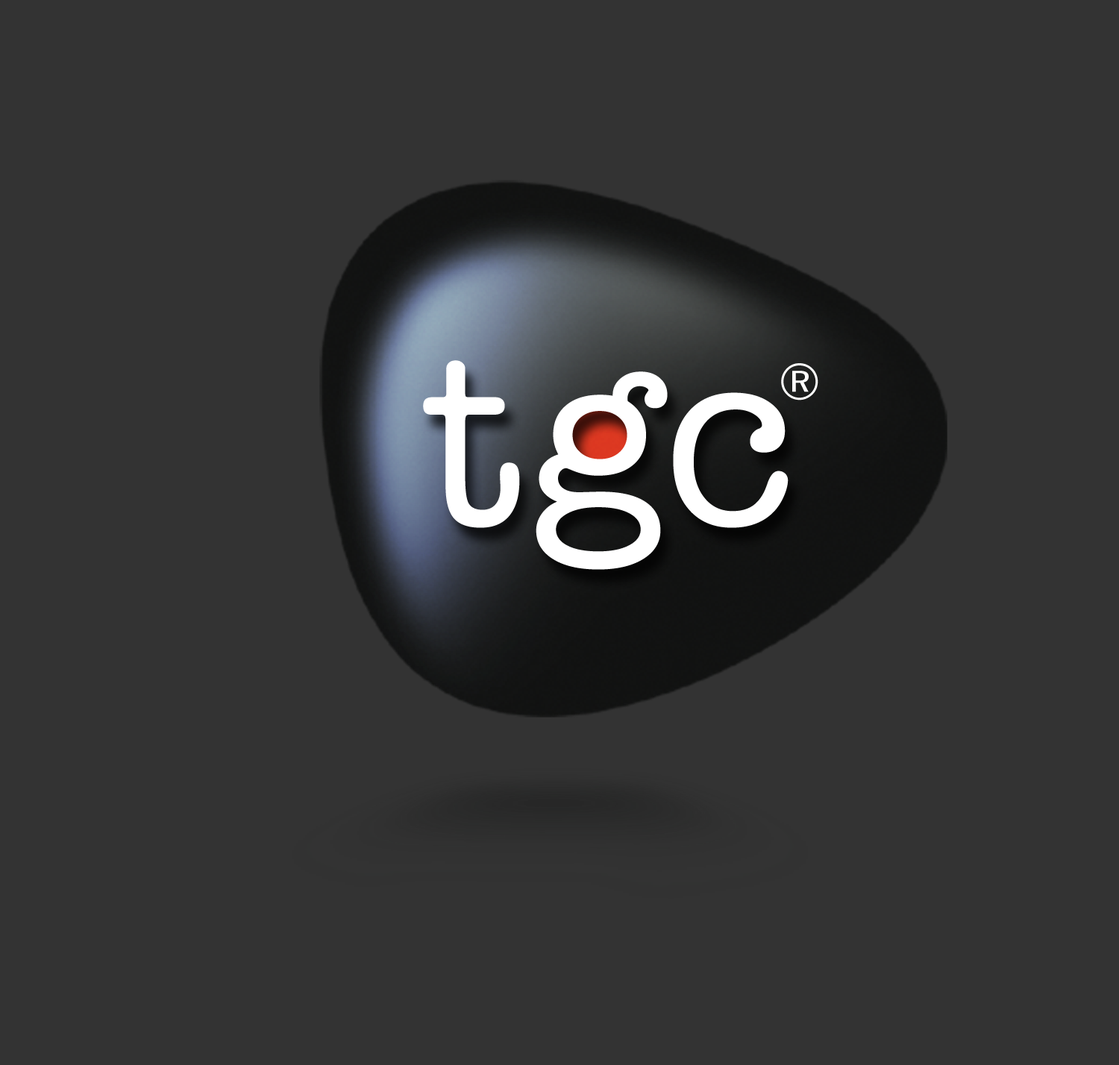
<style>
.page{position:relative;width:1119px;height:1065px;background:#333333}
.page>*{position:absolute;margin:0}
.t1{font:259.9px "AmerTypewriterITCbyBT-Medium";color:#ffffff}
.t2{font:51.1px "AmerTypewriterITCbyBT-Medium";color:#ffffff}
</style>
<div class="page">
<p class="t1" style="left:423px;top:360px;width:366px;height:210px">tgc</p>
<p class="t2" style="left:781px;top:363px;width:37px;height:38px">®</p>
</div>
